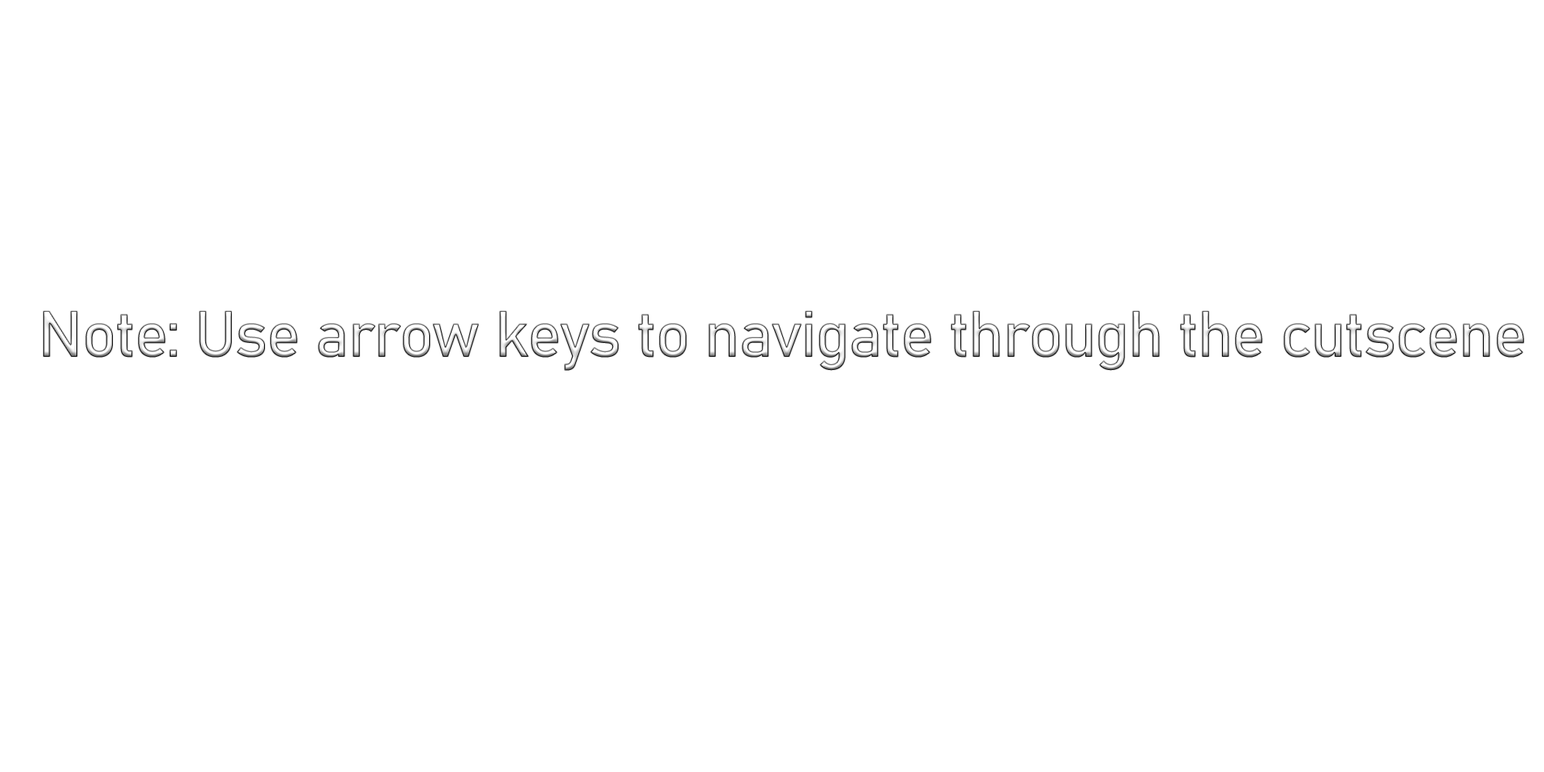
<style>
.page{position:relative;width:1544px;height:772px;background:#ffffff}
.page>*{position:absolute;margin:0}
.t1{font:64.3px "Bahnschrift";letter-spacing:-0.025em}
</style>
<div class="page">
<p class="t1" style="left:43px;top:311px;width:1481px;height:60px">Note: Use arrow keys to navigate through the cutscene</p>
</div>
